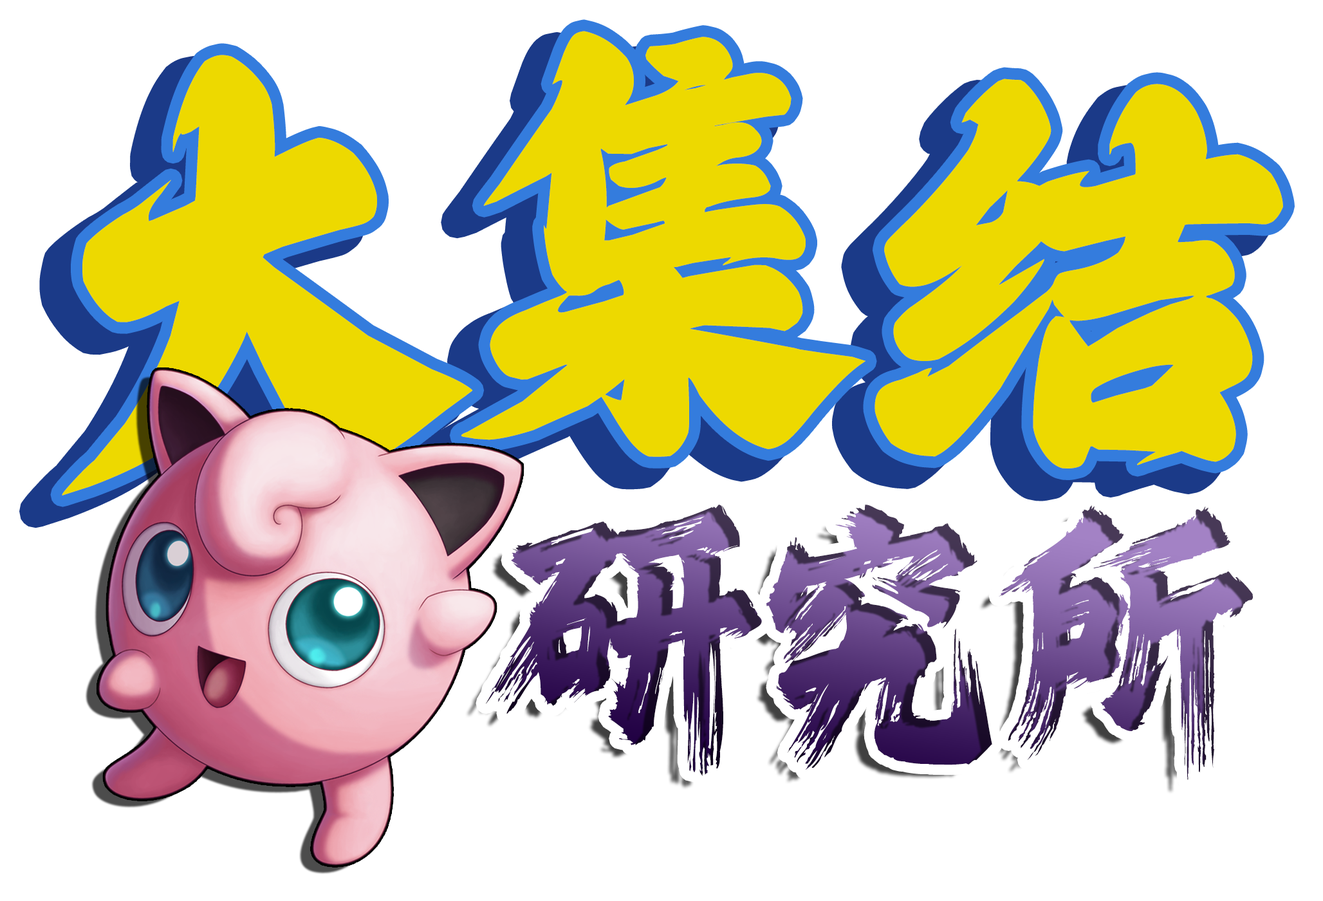
<style>
.page{position:relative;width:1323px;height:901px;background:#ffffff}
.page>*{position:absolute;margin:0}
.t1{font:476.9px "AaLongYanTi";letter-spacing:-0.05em;color:#edd900;scale:0.86 1}
.t2{font:266.7px "REEJI-CHAO-BeiMingGBT-Flash";letter-spacing:-0.05em}
</style>
<div class="page">
<p class="t1" style="left:62px;top:31px;width:1221px;height:465px">大集结</p>
<p class="t2" style="left:486px;top:505px;width:767px;height:275px">研究所</p>
</div>
